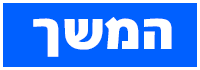
<style>
.page{position:relative;width:200px;height:70px;background:#0060ff}
.page>*{position:absolute;margin:0}
.t1{font:62.6px "FbAlbatros-Black";color:#ffffff}
</style>
<div class="page">
<p class="t1" style="left:33px;top:17px;width:139px;height:40px">המשך</p>
</div>
